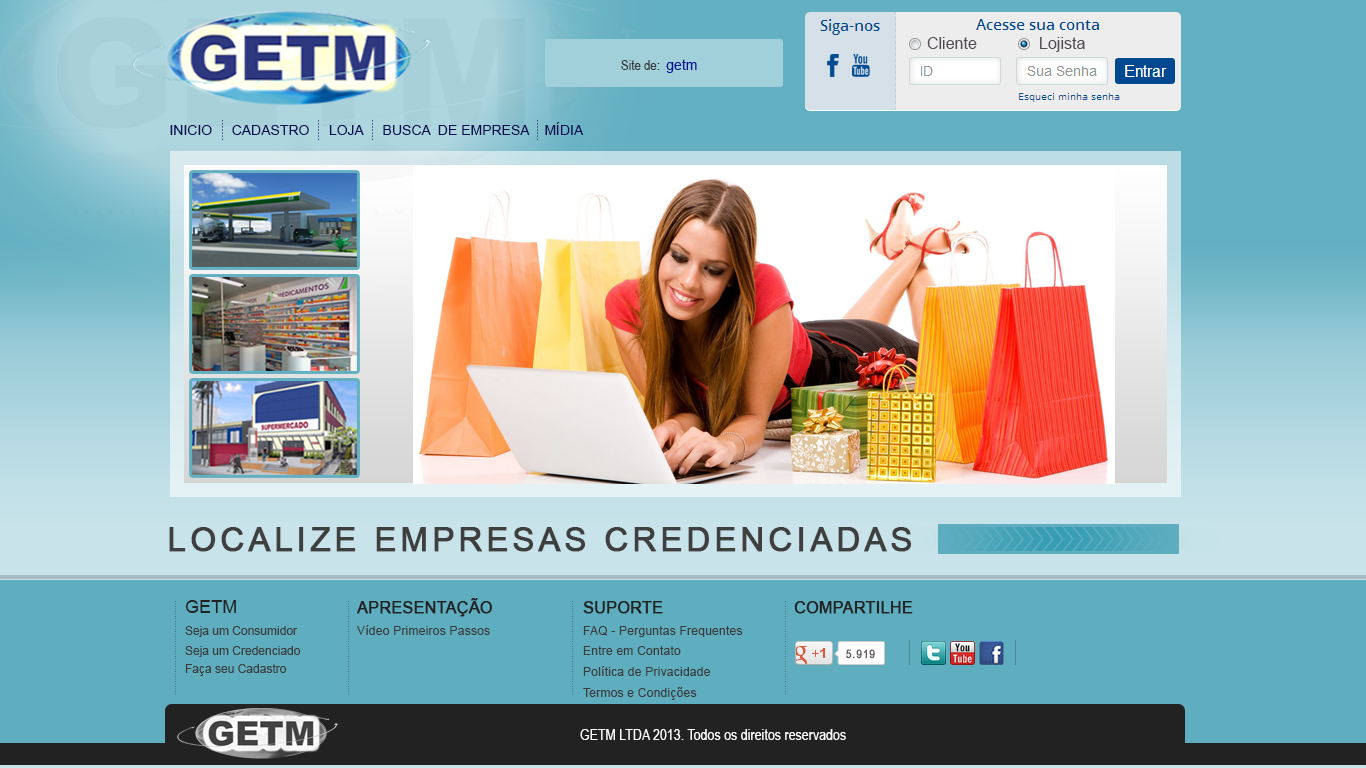
<style>
.page{position:relative;width:1366px;height:768px}
.page>*{position:absolute;margin:0}
.t1{font:16px "ArialMT";color:#514b51}
.t2{font:14px "ArialNarrow";color:#333438}
.t3{font:14px "ArialMT";color:#021492}
.t4{font:14px "ArialMT";color:#020c51}
.t5{font:32.8px "ArialMT";letter-spacing:0.105em;color:#403f3f;font-weight:bold}
.t6{font:18px "ArialMT";letter-spacing:0.005em;color:#222222}
.t7{font:16px "ArialMT";color:#222222;font-weight:bold}
.t8{font:12px "ArialMT";color:#3b3c3c}
.t9{font:12px "ArialMT";letter-spacing:0.02em;color:#3b3c3c}
.t10{font:12px "ArialNarrow";letter-spacing:0.06em;color:#686464;font-weight:bold}
.t11{font:15px "ArialNarrow";letter-spacing:0.005em;color:#ffffff}
</style>
<div class="page">
<p class="t1" style="left:927px;top:37px;width:158px;height:15px">Cliente              Lojista</p>
<p class="t2" style="left:621px;top:59px;width:76px;height:14px">Site de:  <span class="t3">getm</span></p>
<p class="t4" style="left:170px;top:122px;width:414px;height:13px">INICIO     CADASTRO     LOJA     BUSCA  DE EMPRESA    MÍDIA</p>
<p class="t5" style="left:169px;top:527px;width:742px;height:25px">LOCALIZE EMPRESAS CREDENCIADAS</p>
<p class="t6" style="left:185px;top:600px;width:51px;height:13px">GETM</p>
<p class="t7" style="left:357px;top:598px;width:135px;height:19px">APRESENTAÇÃO</p>
<p class="t7" style="left:583px;top:601px;width:80px;height:13px">SUPORTE</p>
<p class="t7" style="left:794px;top:601px;width:119px;height:13px">COMPARTILHE</p>
<p class="t8" style="left:185px;top:626px;width:113px;height:11px">Seja um Consumidor</p>
<p class="t9" style="left:357px;top:625px;width:133px;height:10px">Vídeo Primeiros Passos</p>
<p class="t9" style="left:583px;top:626px;width:160px;height:11px">FAQ - Perguntas Frequentes</p>
<p class="t8" style="left:185px;top:646px;width:116px;height:11px">Seja um Credenciado</p>
<p class="t9" style="left:583px;top:646px;width:98px;height:9px">Entre em Contato</p>
<p class="t10" style="left:846px;top:649px;width:29px;height:10px">5.919</p>
<p class="t8" style="left:185px;top:664px;width:102px;height:12px">Faça seu Cadastro</p>
<p class="t9" style="left:583px;top:666px;width:127px;height:10px">Política de Privacidade</p>
<p class="t9" style="left:583px;top:687px;width:114px;height:13px">Termos e Condições</p>
<p class="t11" style="left:580px;top:729px;width:266px;height:11px">GETM LTDA 2013. Todos os direitos reservados</p>
</div>
